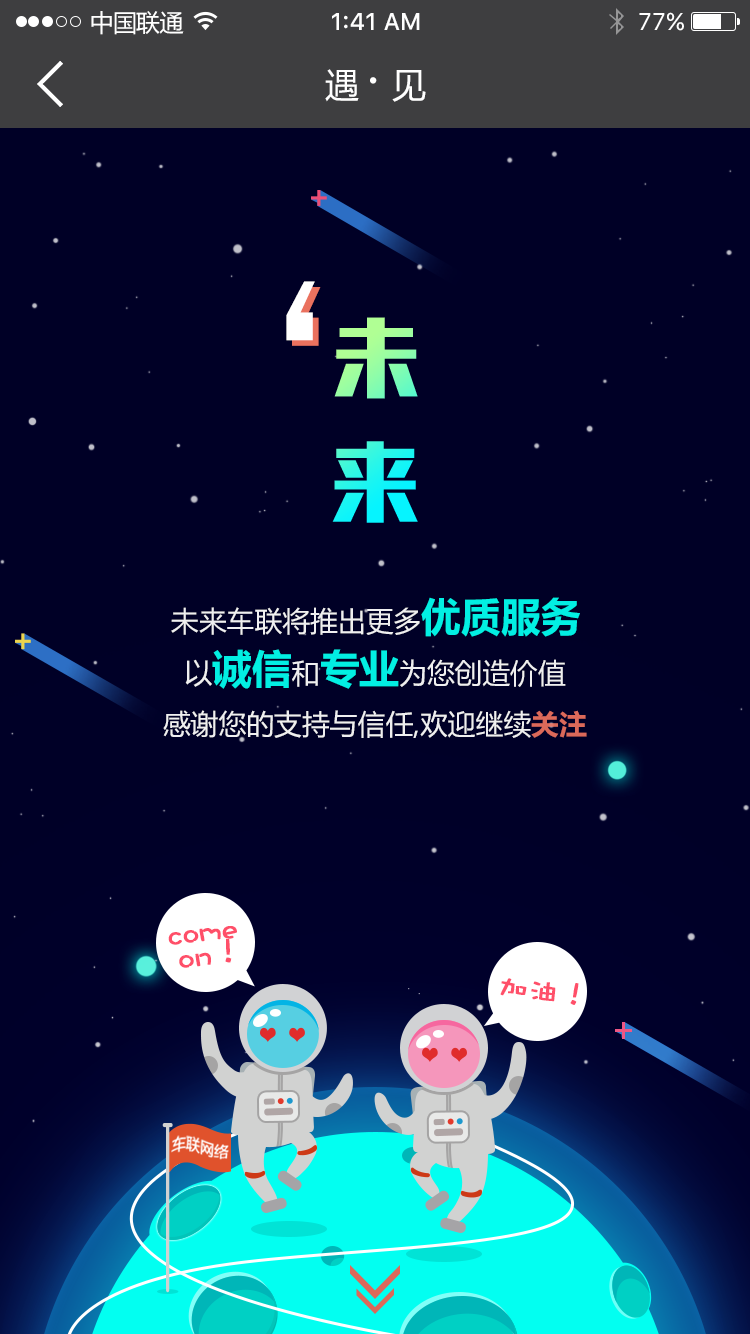
<style>
.page{position:relative;width:750px;height:1334px;background:#000026}
.page>*{position:absolute;margin:0}
.t1{font:24px "MicrosoftYaHei";letter-spacing:-0.025em;color:#ffffff}
.t2{font:24px "SFUIText-Medium";color:#ffffff}
.t3{font:24px "SFUIText-Regular";color:#ffffff}
.t4{font:34px "MicrosoftYaHei";letter-spacing:-0.025em;color:#ffffff}
.t5{font:50px "MicrosoftYaHei";letter-spacing:-0.025em;color:#ffffff}
.t6{font:240px "WenQuanYiZenHei";letter-spacing:-0.04em;color:#ffffff}
.t7{font:240px "WenQuanYiZenHei";letter-spacing:-0.04em}
.t8{font:28px "MicrosoftYaHei";color:#ffffff}
.t9{font:40px "MicrosoftYaHei-Bold";color:#02fff1}
.t10{font:28px "MicrosoftYaHei-Bold";color:#ea715e}
.t11{font:32px/24px "DFPWaWaW5";color:#ff4f69;font-weight:bold}
.t12{font:30px "DFPWaWaW5";color:#ff4f69;font-weight:bold}
</style>
<div class="page">
<p class="t1" style="left:91px;top:11px;width:93px;height:24px">中国联通</p>
<p class="t2" style="left:332px;top:13px;width:88px;height:17px">1:41 AM</p>
<p class="t3" style="left:639px;top:12px;width:45px;height:19px">77%</p>
<p class="t4" style="left:325px;top:69px;width:101px;height:33px">遇 <span class="t5">· </span>见</p>
<p class="t6" style="left:286px;top:281px;width:29px;height:60px;rotate:180deg">，</p>
<p class="t7" style="left:292px;top:287px;width:29px;height:59px;rotate:180deg">，</p>
<p class="t8" style="left:171px;top:597px;width:409px;height:40px;opacity:0.9">未来车联将推出更多<span class="t9">优质服务</span></p>
<p class="t8" style="left:185px;top:649px;width:381px;height:40px;opacity:0.9">以<span class="t9">诚信</span>和<span class="t9">专业</span>为您创造价值</p>
<p class="t8" style="left:163px;top:710px;width:424px;height:28px;opacity:0.9">感谢您的支持与信任,欢迎继续<span class="t10">关注</span></p>
<p class="t11" style="left:168px;top:926px;width:69px;height:42px;text-align:center;rotate:-7deg">come<br> on！</p>
<p class="t12" style="left:500px;top:978px;width:79px;height:27px;rotate:6deg">加油！</p>
</div>
